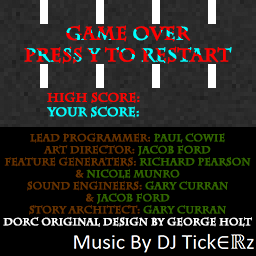
<style>
.page{position:relative;width:256px;height:256px;background:#000000}
.page>*{position:absolute;margin:0}
.t1{font:18px "CharlemagneStd-Bold";color:#ff0000;font-weight:bold}
.t2{font:12px "CharlemagneStd-Bold";color:#fc0301;font-weight:bold}
.t3{font:12px "CharlemagneStd-Bold";color:#00ffff;font-weight:bold}
.t4{font:10px "CharlemagneStd-Bold";color:#ffffff;font-weight:bold}
.t5{font:10px "CharlemagneStd-Bold";color:#663300;font-weight:bold}
.t6{font:10px "CharlemagneStd-Bold";color:#336600;font-weight:bold}
</style>
<div class="page">
<p class="t1" style="left:24px;top:25px;width:208px;height:39px;text-align:center">Game Over<br>Press Y to Restart</p>
<p class="t2" style="left:47px;top:91px;width:93px;height:27px;text-align:center">High Score:<br><span class="t3">Your Score:</span></p>
<p class="t4" style="left:3px;top:133px;width:249px;height:94px;text-align:center"><span class="t5">Lead Programmer: </span><span class="t6">Paul Cowie<br></span><span class="t5">Art Director: </span><span class="t6">Jacob Ford<br></span><span class="t5">Feature Generaters: </span><span class="t6">Richard Pearson </span><span class="t5">&amp; </span><span class="t6">Nicole Munro<br></span><span class="t5">Sound Engineers: </span><span class="t6">Gary Curran<br></span><span class="t5">&amp; </span><span class="t6">Jacob FoRd<br></span><span class="t5">Story Architect: </span><span class="t6">Gary Curran<br></span>Dorc original design by george holt</p>
</div>
